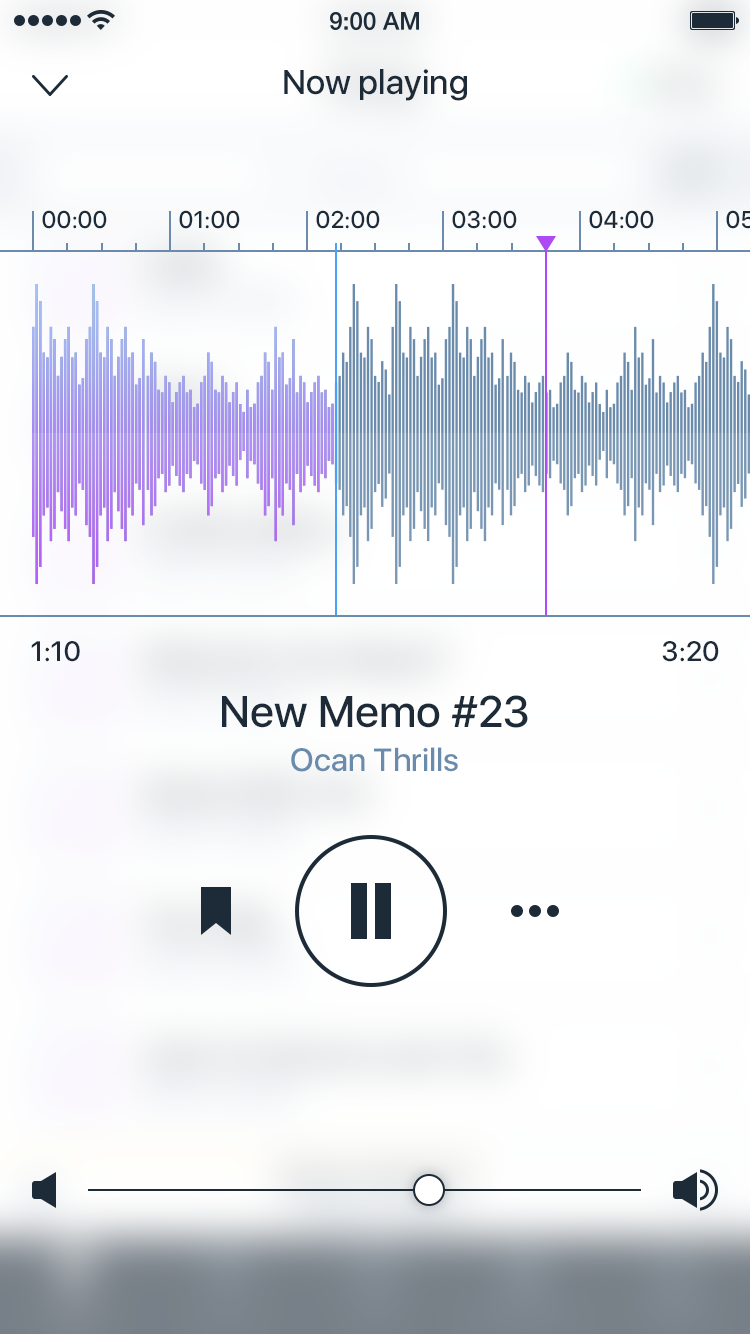
<style>
.page{position:relative;width:750px;height:1334px}
.page>*{position:absolute;margin:0}
.t1{font:34px "SFUIDisplay-Medium";color:#1d2b38}
.t2{font:24px "SFUIDisplay-Medium";color:#1d2b38}
.t3{font:28px "SFUIDisplay-Medium";color:#1d2b38}
.t4{font:44px/44px "SFUIDisplay-Medium";color:#1d2b38}
.t5{font:32px/44px "SFUIDisplay-Medium";color:#6a8bab}
</style>
<div class="page">
<p class="t1" style="left:284px;top:69px;width:183px;height:32px">Now playing</p>
<p class="t2" style="left:42px;top:210px;width:65px;height:19px">00:00</p>
<p class="t2" style="left:179px;top:210px;width:61px;height:19px">01:00</p>
<p class="t2" style="left:316px;top:210px;width:64px;height:19px">02:00</p>
<p class="t2" style="left:452px;top:210px;width:65px;height:19px">03:00</p>
<p class="t2" style="left:589px;top:210px;width:65px;height:19px">04:00</p>
<p class="t3" style="left:31px;top:641px;width:49px;height:21px">1:10</p>
<p class="t3" style="left:662px;top:641px;width:57px;height:21px">3:20</p>
<p class="t4" style="left:222px;top:695px;width:306px;height:77px;text-align:center">New Memo #23<br><span class="t5">Ocan Thrills</span></p>
</div>
